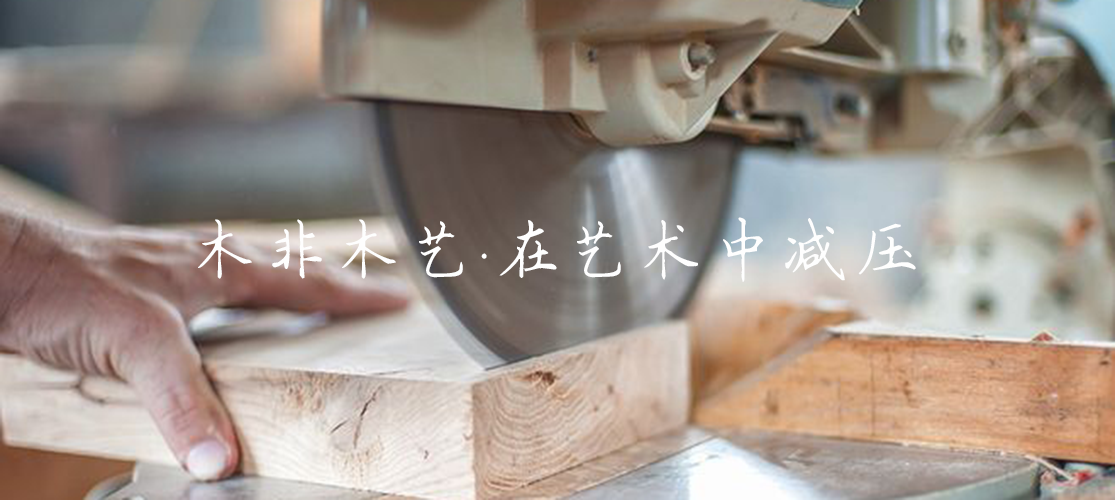
<style>
.page{position:relative;width:1115px;height:500px}
.page>*{position:absolute;margin:0}
.t1{font:72px "QXyingbikai";color:#fefefe}
</style>
<div class="page">
<p class="t1" style="left:198px;top:217px;width:718px;height:65px">木非木艺·在艺术中减压</p>
</div>
